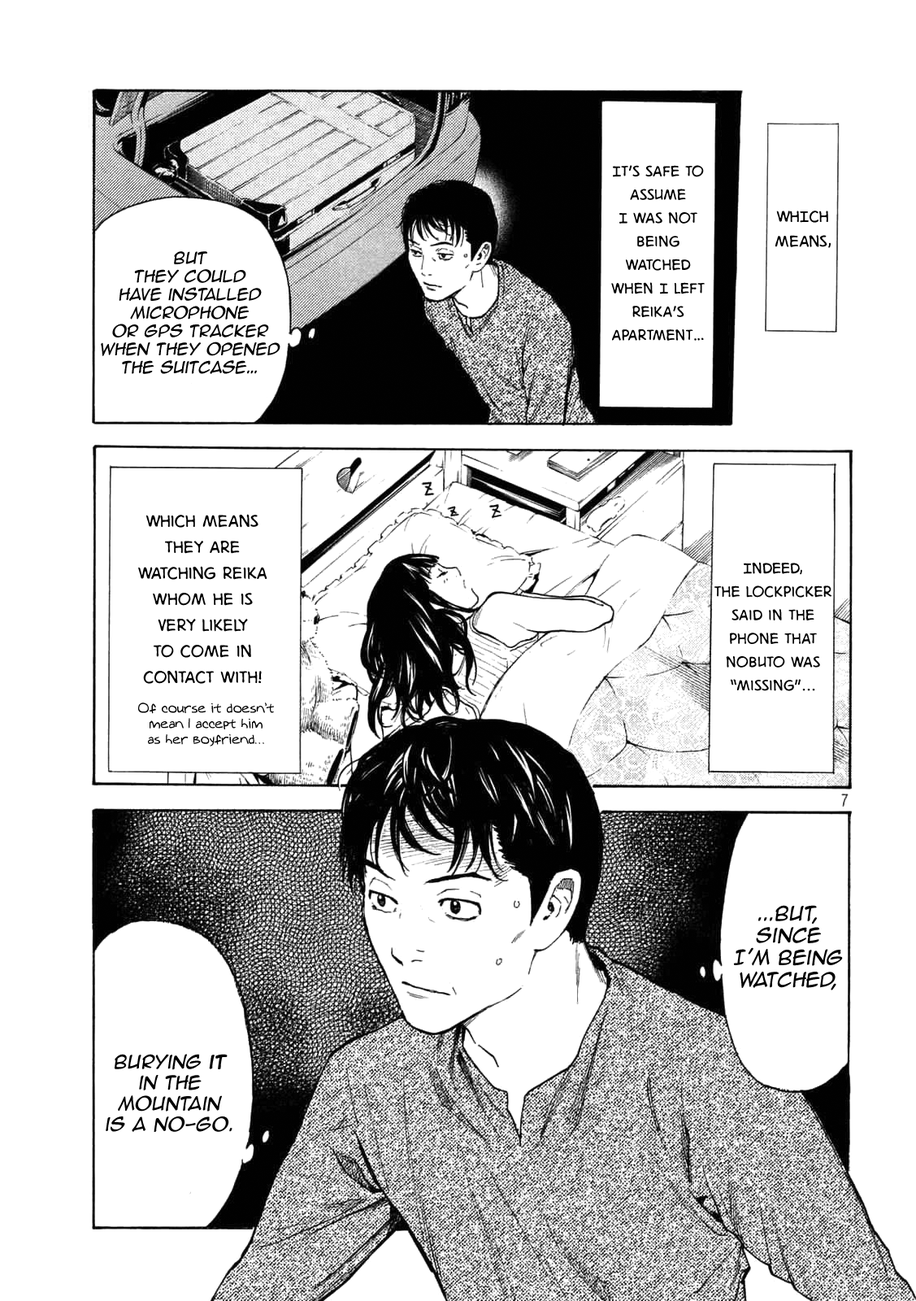
<style>
.page{position:relative;width:916px;height:1301px;background:#ffffff}
.page>*{position:absolute;margin:0}
.t1{font:19.5px "DigitalStrip.BB";color:#000000}
.t2{font:20.6px "DigitalStrip.BB";color:#000000}
.t3{font:15.2px "AnimeAce2.0BB";color:#000000;font-style:italic}
.t4{font:21.7px "DigitalStrip.BB";color:#000000}
.t5{font:13px "Augie";color:#000000}
.t6{font:18.4px "AnimeAce2.0BB";color:#000000;font-style:italic}
.t7{font:17.4px "AnimeAce2.0BB";color:#000000;font-style:italic}
.t8{font:17.4px "AnimeAce2.0BB";color:#000000;font-weight:bold;font-style:italic}
</style>
<div class="page">
<p class="t1" style="left:612px;top:165px;width:93px;height:176px;text-align:center">It’s safe to assume <br>I was not being watched when I left Reika’s apartment…</p>
<p class="t2" style="left:776px;top:211px;width:55px;height:37px;text-align:center">WHICH MEANS,</p>
<p class="t3" style="left:101px;top:251px;width:180px;height:123px;text-align:center">But <br>they could <br>have installed microphone <br>or GPS tracker when they opened the suitcase…</p>
<p class="t4" style="left:138px;top:514px;width:130px;height:170px;text-align:center">Which means <br>they are watching Reika whom he is <br>very likely <br>to come in contact with!</p>
<p class="t1" style="left:715px;top:562px;width:117px;height:129px;text-align:center">Indeed, <br>the lockpicker said in the phone that Nobuto was “missing”...</p>
<p class="t5" style="left:138px;top:703px;width:136px;height:44px;text-align:center">Of course it doesn’t mean I accept him <br>as her boyfriend…</p>
<p class="t6" style="left:734px;top:905px;width:109px;height:85px;text-align:center">...But, since <br>I’m being watched,</p>
<p class="t7" style="left:106px;top:1054px;width:127px;height:78px;text-align:center">Burying <span class="t8">it</span> <br>in the mountain <br>is a no-go.</p>
</div>
